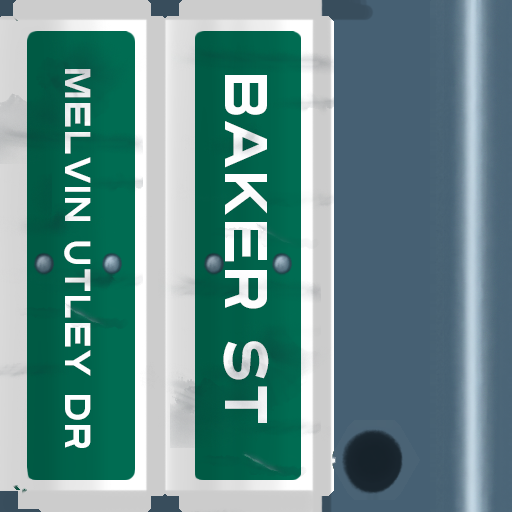
<style>
.page{position:relative;width:512px;height:512px}
.page>*{position:absolute;margin:0}
.t1{font:36px "Turnpike";color:#fefeff;scale:0.75 1}
.t2{font:60px "Turnpike";color:#fefeff;scale:0.75 1}
</style>
<div class="page">
<p class="t1" style="left:64px;top:69px;width:27px;height:379px;rotate:90deg">Melvin Utley Dr</p>
<p class="t2" style="left:223px;top:75px;width:46px;height:348px;rotate:90deg">Baker St</p>
</div>
